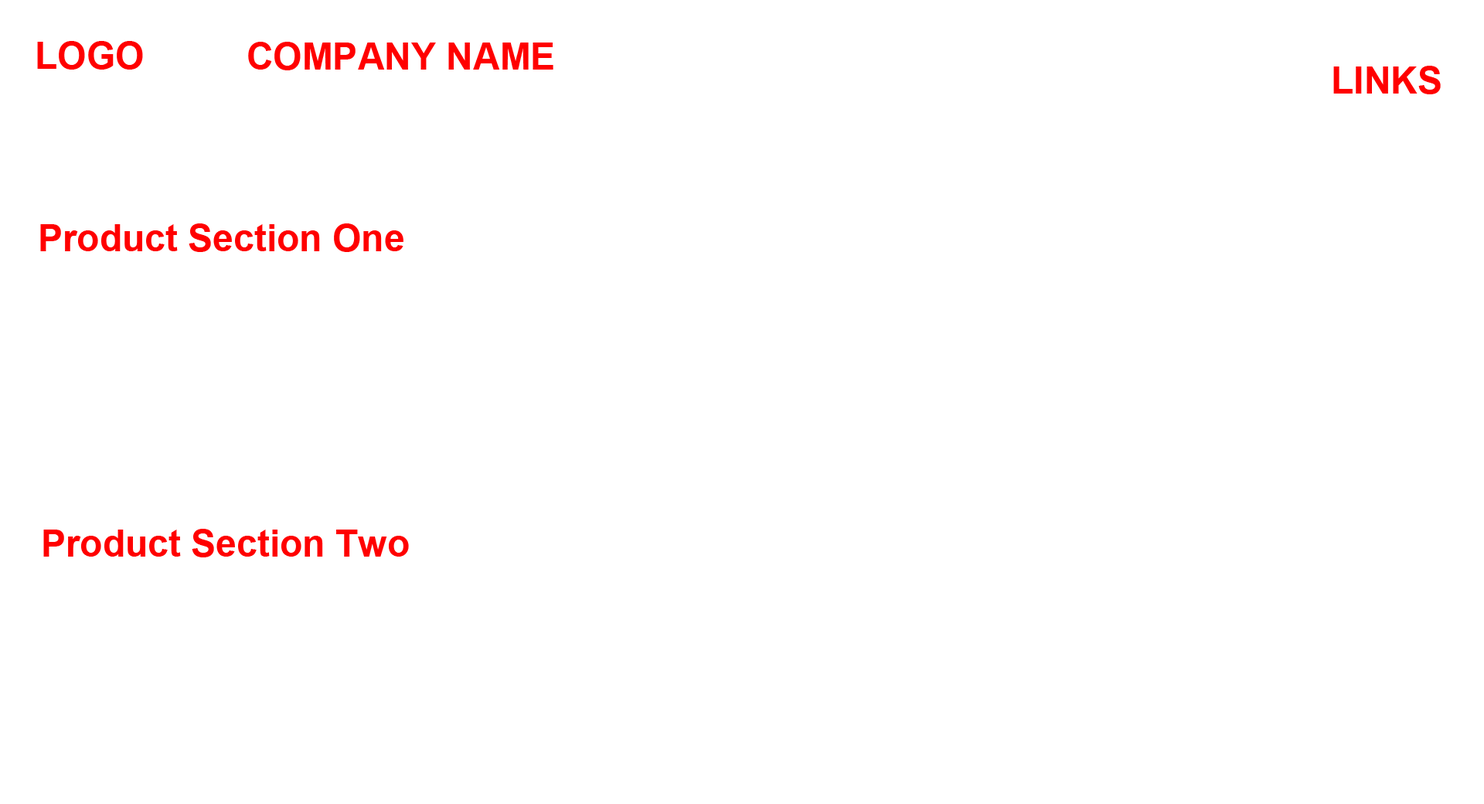
<style>
.page{position:relative;width:1484px;height:804px;background:#ffffff}
.page>*{position:absolute;margin:0}
.t1{font:37.1px "Arial-BoldMT";color:#ff0000}
</style>
<div class="page">
<p class="t1" style="left:37px;top:41px;width:106px;height:29px">LOGO</p>
<p class="t1" style="left:248px;top:42px;width:305px;height:28px">COMPANY NAME</p>
<p class="t1" style="left:1333px;top:66px;width:107px;height:28px">LINKS</p>
<p class="t1" style="left:40px;top:223px;width:363px;height:29px">Product Section One</p>
<p class="t1" style="left:43px;top:529px;width:366px;height:28px">Product Section Two</p>
</div>
